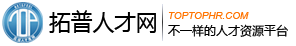
<style>
.page{position:relative;width:296px;height:46px;background:#ffffff}
.page>*{position:absolute;margin:0}
.t1{font:21.6px "MicrosoftYaHei";color:#000000}
.t2{font:9.8px "Arial-ItalicMT";color:#ff7300}
.t3{font:12px "MicrosoftYaHei";color:#000000}
</style>
<div class="page">
<p class="t1" style="left:49px;top:10px;width:107px;height:23px">拓普人才网</p>
<p class="t2" style="left:168px;top:12px;width:81px;height:7px">TOPTOPHR.COM</p>
<p class="t3" style="left:168px;top:24px;width:120px;height:13px">不一样的人才资源平台</p>
</div>
